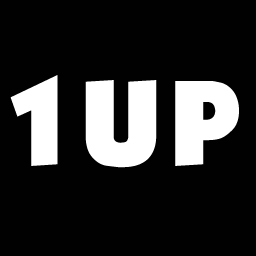
<style>
.page{position:relative;width:256px;height:256px;background:#010101}
.page>*{position:absolute;margin:0}
.t1{font:120px "Boulder-Regular";letter-spacing:0.075em;color:#ffffff}
</style>
<div class="page">
<p class="t1" style="left:10px;top:75px;width:229px;height:93px">1UP</p>
</div>
